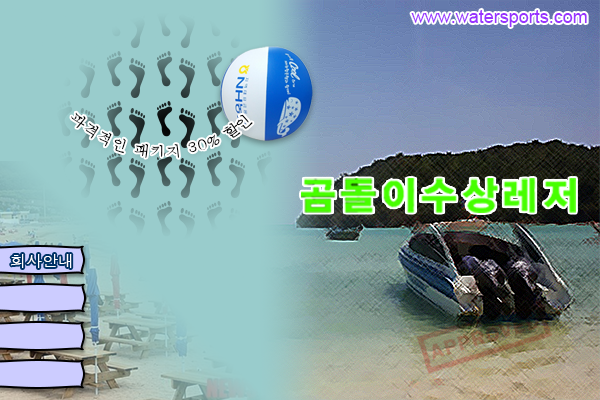
<style>
.page{position:relative;width:600px;height:400px;background:#99cccc}
.page>*{position:absolute;margin:0}
.t1{font:18px "ArialMT";color:#9933ff}
.t2{font:14px "Batang";color:#020202}
.t3{font:16px "Dotum";color:#ffffff}
</style>
<div class="page">
<p class="t1" style="left:411px;top:10px;width:176px;height:17px">www.watersports.com</p>
<p class="t2" style="left:71px;top:112px;width:182px;height:46px">파격적인 패키지 30% 할인</p>
<p class="t3" style="left:11px;top:254px;width:61px;height:14px">회사안내</p>
</div>
